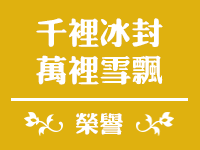
<style>
.page{position:relative;width:200px;height:150px;background:#dfb10f}
.page>*{position:absolute;margin:0}
.t1{font:31.2px "¾­µä·±·ÂÔ² Regular";color:#ffffff}
.t2{font:23.7px "¾­µä·±·ÂÔ² Regular";color:#ffffff}
</style>
<div class="page">
<p class="t1" style="left:36px;top:18px;width:127px;height:67px">千里冰封<br>万里雪飘</p>
<p class="t2" style="left:76px;top:113px;width:47px;height:22px">荣誉</p>
</div>
